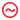
<style>
.page{position:relative;width:20px;height:20px;background:#ffffff}
.page>*{position:absolute;margin:0}
.t1{font:18.1px "Consolas";color:#ed1c24;scale:1.07 1}
</style>
<div class="page">
<p class="t1" style="left:5px;top:8px;width:11px;height:5px">~</p>
</div>
